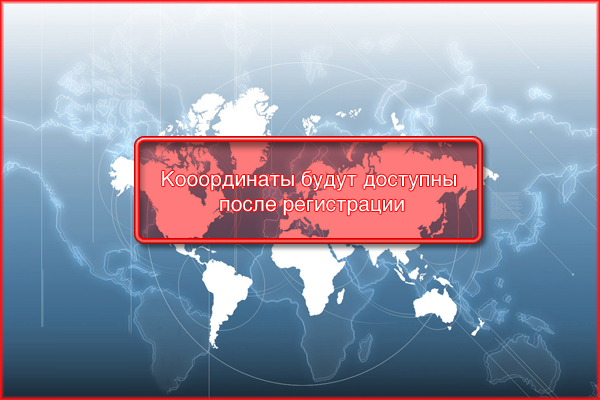
<style>
.page{position:relative;width:600px;height:400px}
.page>*{position:absolute;margin:0}
.t1{font:21px "HelveticaC";color:#ffffff}
</style>
<div class="page">
<p class="t1" style="left:162px;top:170px;width:294px;height:46px;text-align:center">Кооординаты будут доступны <br>после регистрации</p>
</div>
